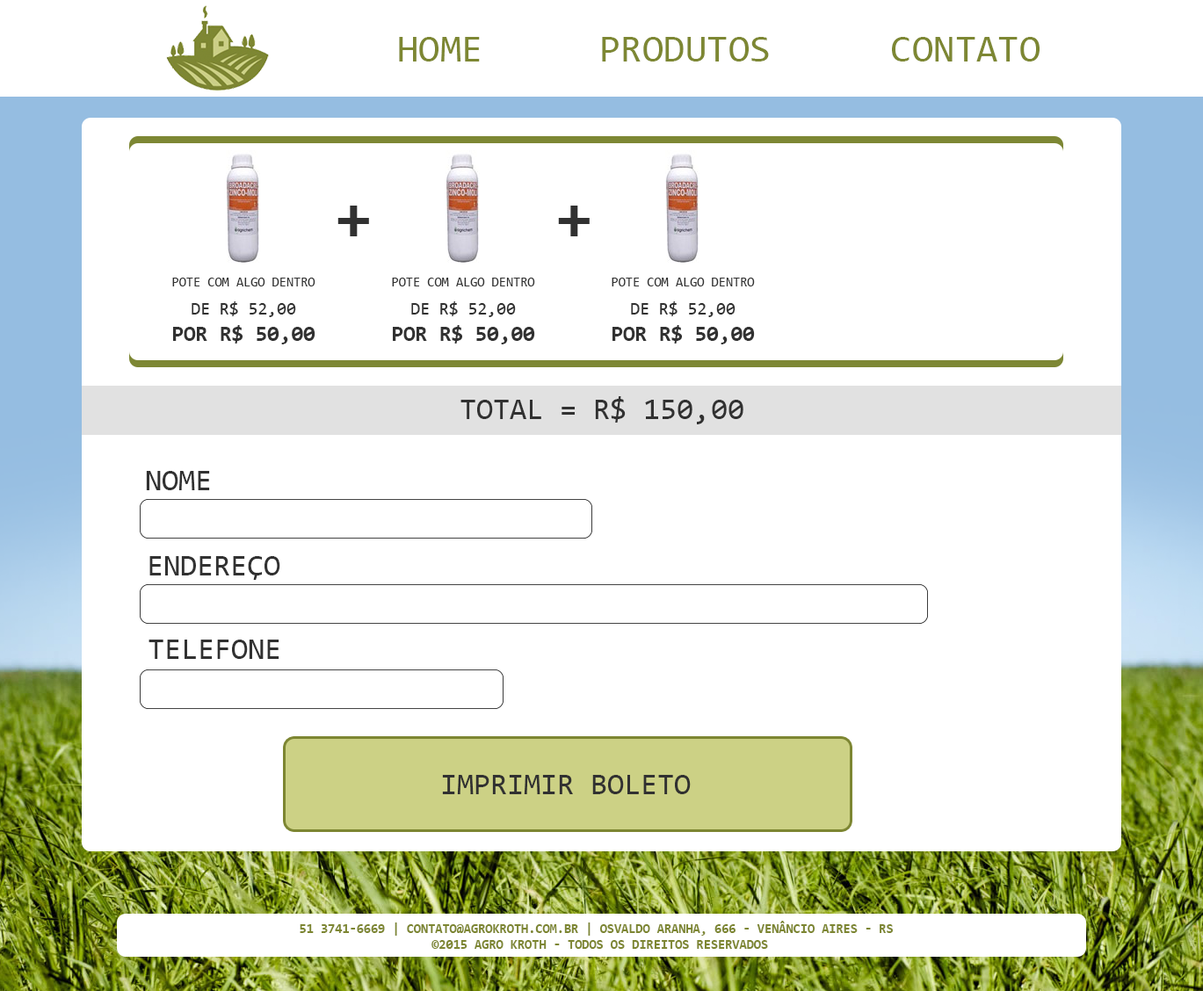
<style>
.page{position:relative;width:1203px;height:991px;background:#ffffff}
.page>*{position:absolute;margin:0}
.t1{font:39.1px "Consolas";color:#7d8733;text-transform:uppercase}
.t2{font:65.1px "Consolas-Bold";color:#313131;text-transform:uppercase}
.t3{font:13px "Consolas";color:#313131;text-transform:uppercase}
.t4{font:21.7px "Consolas-Bold";color:#313131;text-transform:uppercase}
.t5{font:17.4px "Consolas";color:#313131;text-transform:uppercase}
.t6{font:30.4px "Consolas";color:#313131;text-transform:uppercase}
.t7{font:13px "Consolas-Bold";color:#7d8632;text-transform:uppercase}
</style>
<div class="page">
<p class="t1" style="left:399px;top:37px;width:81px;height:25px">HOME</p>
<p class="t1" style="left:602px;top:37px;width:167px;height:25px">PRODUTOS</p>
<p class="t1" style="left:892px;top:37px;width:148px;height:25px">CONTATO</p>
<p class="t2" style="left:337px;top:206px;width:32px;height:30px">+</p>
<p class="t2" style="left:558px;top:206px;width:32px;height:30px">+</p>
<p class="t3" style="left:172px;top:278px;width:143px;height:8px">POTE COM ALGO DENTRO</p>
<p class="t3" style="left:392px;top:278px;width:143px;height:8px">POTE COM ALGO DENTRO</p>
<p class="t3" style="left:612px;top:278px;width:143px;height:8px">POTE COM ALGO DENTRO</p>
<p class="t4" style="left:173px;top:301px;width:142px;height:43px;text-align:center"><span class="t5">de r$ 52,00<br></span>por r$ 50,00</p>
<p class="t4" style="left:393px;top:301px;width:142px;height:43px;text-align:center"><span class="t5">de r$ 52,00<br></span>por r$ 50,00</p>
<p class="t4" style="left:612px;top:301px;width:143px;height:43px;text-align:center"><span class="t5">de r$ 52,00<br></span>por r$ 50,00</p>
<p class="t6" style="left:460px;top:396px;width:283px;height:28px">TOTAL = r$ 150,00</p>
<p class="t6" style="left:146px;top:471px;width:64px;height:19px">nome</p>
<p class="t6" style="left:149px;top:556px;width:131px;height:24px">Endereço</p>
<p class="t6" style="left:149px;top:640px;width:130px;height:19px">Telefone</p>
<p class="t6" style="left:442px;top:775px;width:249px;height:19px">IMPRIMIR BOLETO</p>
<p class="t7" style="left:300px;top:921px;width:593px;height:28px;text-align:center">51 3741-6669 | contato@AGROKROTH.com.br | Osvaldo aranha, 666 - Venâncio Aires - RS <br>©2015 AGRO KROTH - Todos os direitos reservados</p>
</div>
